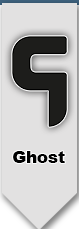
<style>
.page{position:relative;width:79px;height:229px;background:#e2e1e1}
.page>*{position:absolute;margin:0}
.t1{font:16.7px "Arial-Black";letter-spacing:-0.01em;color:#000000}
</style>
<div class="page">
<p class="t1" style="left:13px;top:151px;width:52px;height:12px">Ghost</p>
</div>
